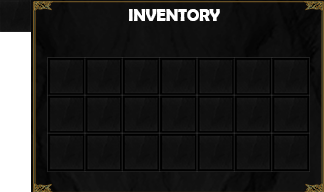
<style>
.page{position:relative;width:324px;height:192px}
.page>*{position:absolute;margin:0}
.t1{font:16.5px "BerlinSansFBDemi-Bold";color:#ffffff}
</style>
<div class="page">
<p class="t1" style="left:129px;top:9px;width:91px;height:12px">INVENTORY</p>
</div>
